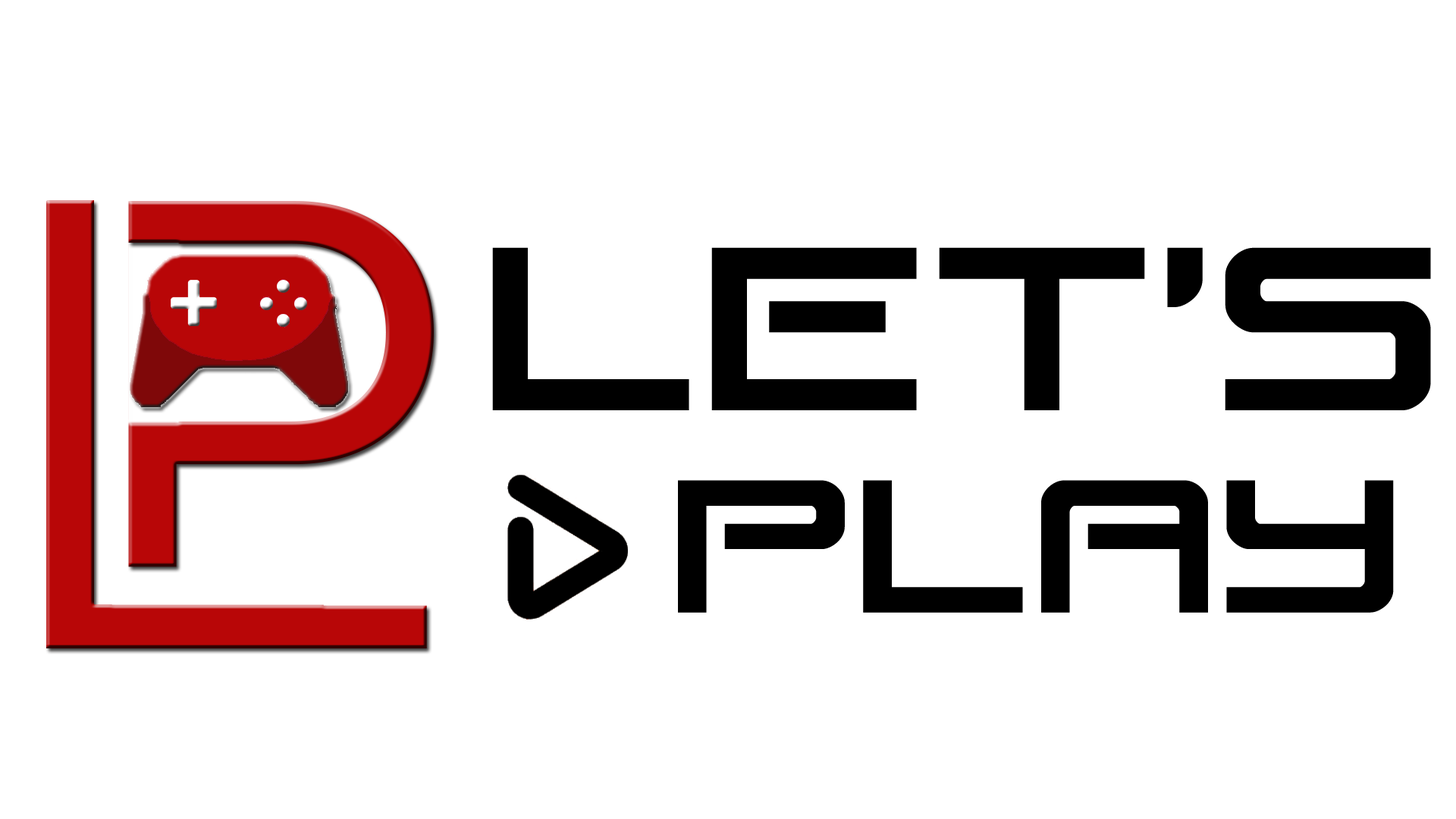
<style>
.page{position:relative;width:1456px;height:819px;background:#ffffff}
.page>*{position:absolute;margin:0}
.t1{font:303.3px "BladeSinger";color:#000000}
.t2{font:246.5px "BladeSinger";color:#000000}
</style>
<div class="page">
<p class="t1" style="left:492px;top:247px;width:939px;height:163px">LET’S</p>
<p class="t2" style="left:678px;top:480px;width:716px;height:133px">PLAY</p>
</div>
